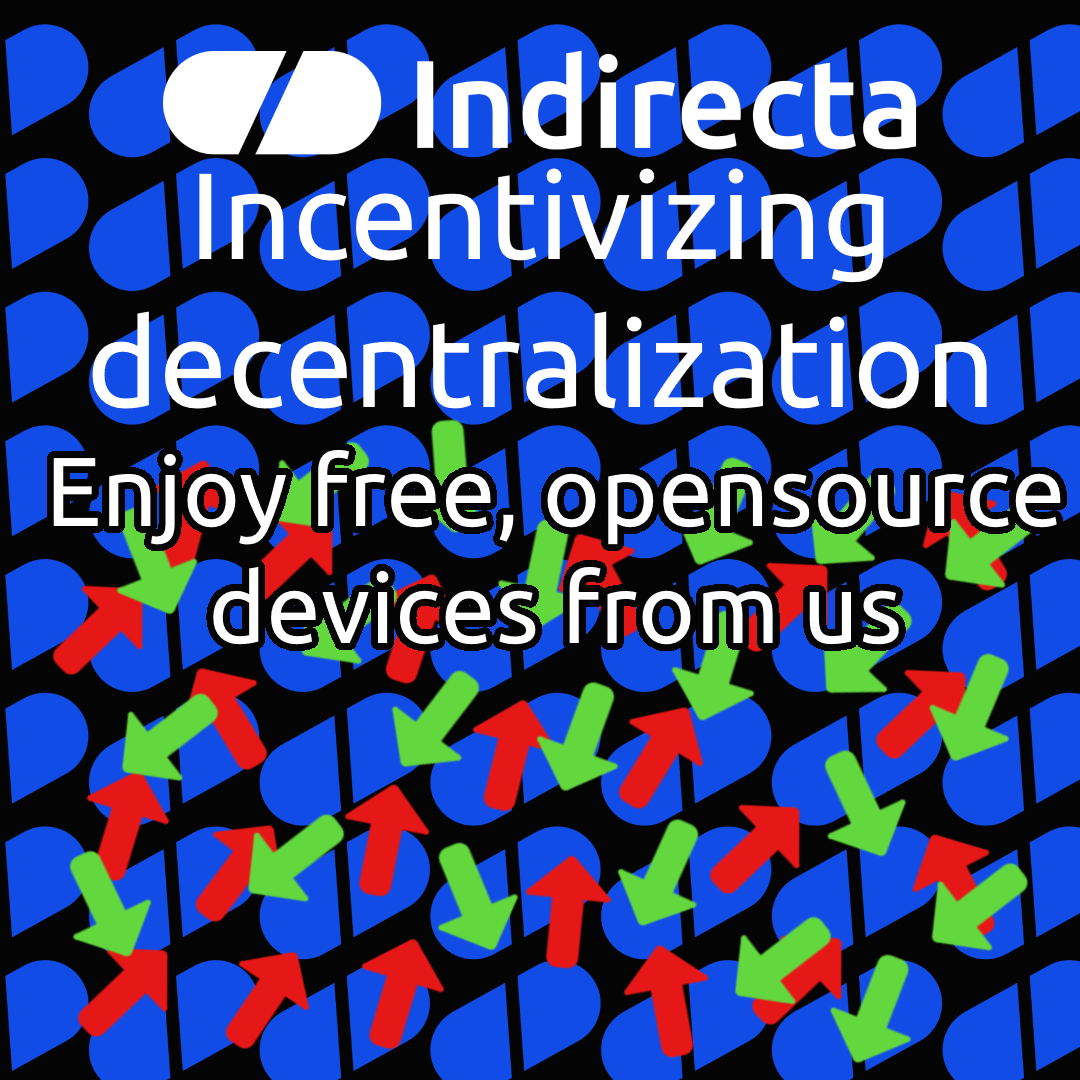
<style>
.page{position:relative;width:1080px;height:1080px;background:#040404}
.page>*{position:absolute;margin:0}
.t1{font:123px "Ubuntu-Regular";color:#ffffff}
.t2{font:98.1px "Ubuntu-Regular";color:#ffffff}
</style>
<div class="page">
<p class="t1" style="left:92px;top:168px;width:895px;height:241px;text-align:center">Incentivizing<br>decentralization</p>
<p class="t2" style="left:53px;top:449px;width:1008px;height:196px;text-align:center">Enjoy free, opensource<br>devices from us</p>
</div>
